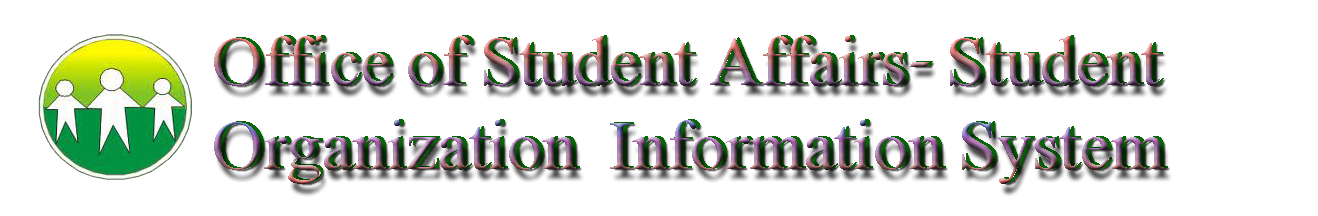
<style>
.page{position:relative;width:1318px;height:216px;background:#ffffff}
.page>*{position:absolute;margin:0}
.t1{font:70px "David"}
</style>
<div class="page">
<p class="t1" style="left:214px;top:36px;width:950px;height:148px">Office of Student Affairs- Student Organization  Information System</p>
<p class="t1" style="left:218px;top:35px;width:950px;height:148px">Office of Student Affairs- Student Organization  Information System</p>
</div>
